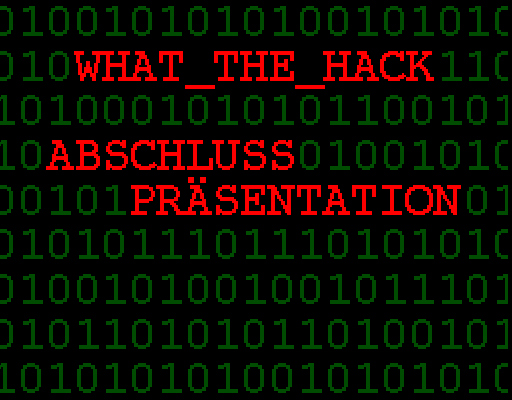
<style>
.page{position:relative;width:512px;height:400px;background:#000000}
.page>*{position:absolute;margin:0}
.t1{font:49.6px "Courier";letter-spacing:-0.005em;color:#ff0000;text-transform:uppercase}
</style>
<div class="page">
<p class="t1" style="left:74px;top:51px;width:360px;height:38px">WHAT_THE_HACK</p>
<p class="t1" style="left:46px;top:140px;width:248px;height:30px">Abschluss</p>
<p class="t1" style="left:131px;top:177px;width:330px;height:38px">Präsentation</p>
</div>
